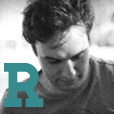
<style>
.page{position:relative;width:114px;height:114px}
.page>*{position:absolute;margin:0}
.t1{font:63px "Homestead-Regular";color:#368b8f}
</style>
<div class="page">
<p class="t1" style="left:4px;top:63px;width:40px;height:44px">R</p>
</div>
